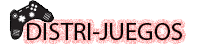
<style>
.page{position:relative;width:200px;height:50px;background:#ffffff}
.page>*{position:absolute;margin:0}
.t1{font:25px "MyriadPro-Regular";color:#070707}
</style>
<div class="page">
<p class="t1" style="left:27px;top:23px;width:155px;height:17px">DISTRI-JUEGOS</p>
</div>
